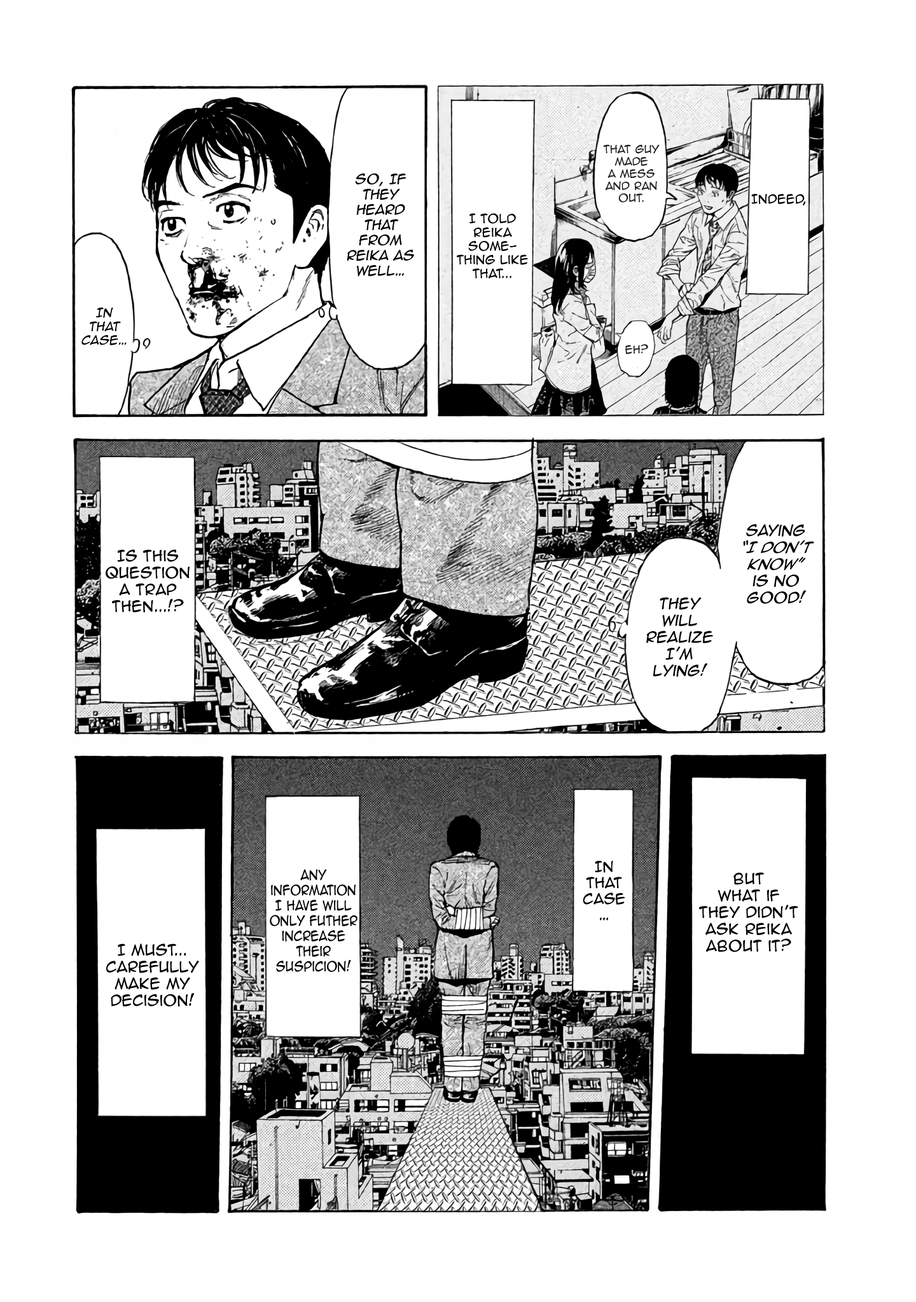
<style>
.page{position:relative;width:916px;height:1302px;background:#ffffff}
.page>*{position:absolute;margin:0}
.t1{font:10.2px "AnimeAce2.0BB";color:#212121}
.t2{font:12.7px "AnimeAce2.0BB";color:#000000;font-style:italic}
.t3{font:11.4px "AnimeAce2.0BB";color:#000000}
.t4{font:11.4px "AnimeAce2.0BB";color:#000000;font-style:italic}
.t5{font:10.2px "AnimeAce2.0BB";color:#1c1c1c}
.t6{font:14px "AnimeAce2.0BB-Italic";color:#000000;font-style:italic}
.t7{font:14px "AnimeAce2.0BB";color:#000000;font-style:italic}
.t8{font:14px "AnimeAce2.0BB";color:#000000}
.t9{font:12.7px "AnimeAce2.0BB";color:#000000;scale:0.87 1}
.t10{font:13.4px "AnimeAce2.0BB";color:#000000}
</style>
<div class="page">
<p class="t1" style="left:603px;top:144px;width:56px;height:59px;text-align:center">That guy made <br>a mess and ran out.</p>
<p class="t2" style="left:347px;top:173px;width:67px;height:104px;text-align:center">so, If they heard  that from Reika as well…</p>
<p class="t3" style="left:751px;top:194px;width:55px;height:12px">Indeed,</p>
<p class="t3" style="left:457px;top:213px;width:71px;height:66px;text-align:center">I told Reika <br>some-<br>thing like that...</p>
<p class="t4" style="left:81px;top:307px;width:46px;height:38px;text-align:center">In that case…</p>
<p class="t5" style="left:625px;top:344px;width:23px;height:10px">Eh?</p>
<p class="t6" style="left:743px;top:524px;width:71px;height:80px;text-align:center"><span class="t7">Saying <br></span>“I don’t know” <br><span class="t7">is no good!</span></p>
<p class="t8" style="left:106px;top:549px;width:83px;height:64px;text-align:center">Is this question <br>a trap then...!?</p>
<p class="t7" style="left:646px;top:597px;width:67px;height:80px;text-align:center">They will realize I’m lying!</p>
<p class="t9" style="left:270px;top:869px;width:87px;height:103px;text-align:center">Any information I have will only futher increase their suspicion!</p>
<p class="t10" style="left:582px;top:861px;width:43px;height:60px;text-align:center">In that case…</p>
<p class="t8" style="left:699px;top:872px;width:99px;height:81px;text-align:center">But <br>what if <br>they didn’t ask Reika about it?</p>
<p class="t8" style="left:106px;top:944px;width:93px;height:63px;text-align:center">I must... carefully make my decision!</p>
</div>
